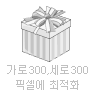
<style>
.page{position:relative;width:95px;height:95px;background:#ffffff}
.page>*{position:absolute;margin:0}
.t1{font:12px/15px "morris9";color:#c0c0c0}
</style>
<div class="page">
<p class="t1" style="left:7px;top:65px;width:81px;height:25px;text-align:center">가로300,세로300<br>픽셀에 최적화</p>
</div>
